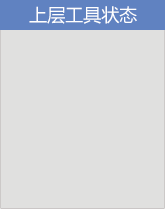
<style>
.page{position:relative;width:165px;height:209px;background:#e0e0df}
.page>*{position:absolute;margin:0}
.t1{font:18px "MicrosoftYaHeiUI";color:#ffffff}
</style>
<div class="page">
<p class="t1" style="left:29px;top:6px;width:108px;height:18px">上层工具状态</p>
</div>
